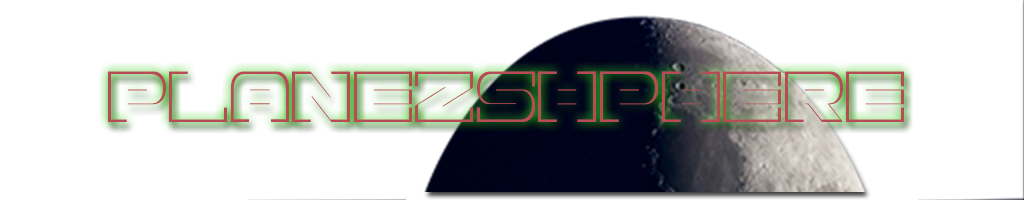
<style>
.page{position:relative;width:1024px;height:200px;background:#ffffff}
.page>*{position:absolute;margin:0}
.t1{font:72px "Spac3neon";color:#b74c56}
</style>
<div class="page">
<p class="t1" style="left:108px;top:71px;width:796px;height:51px">planezshphere</p>
</div>
